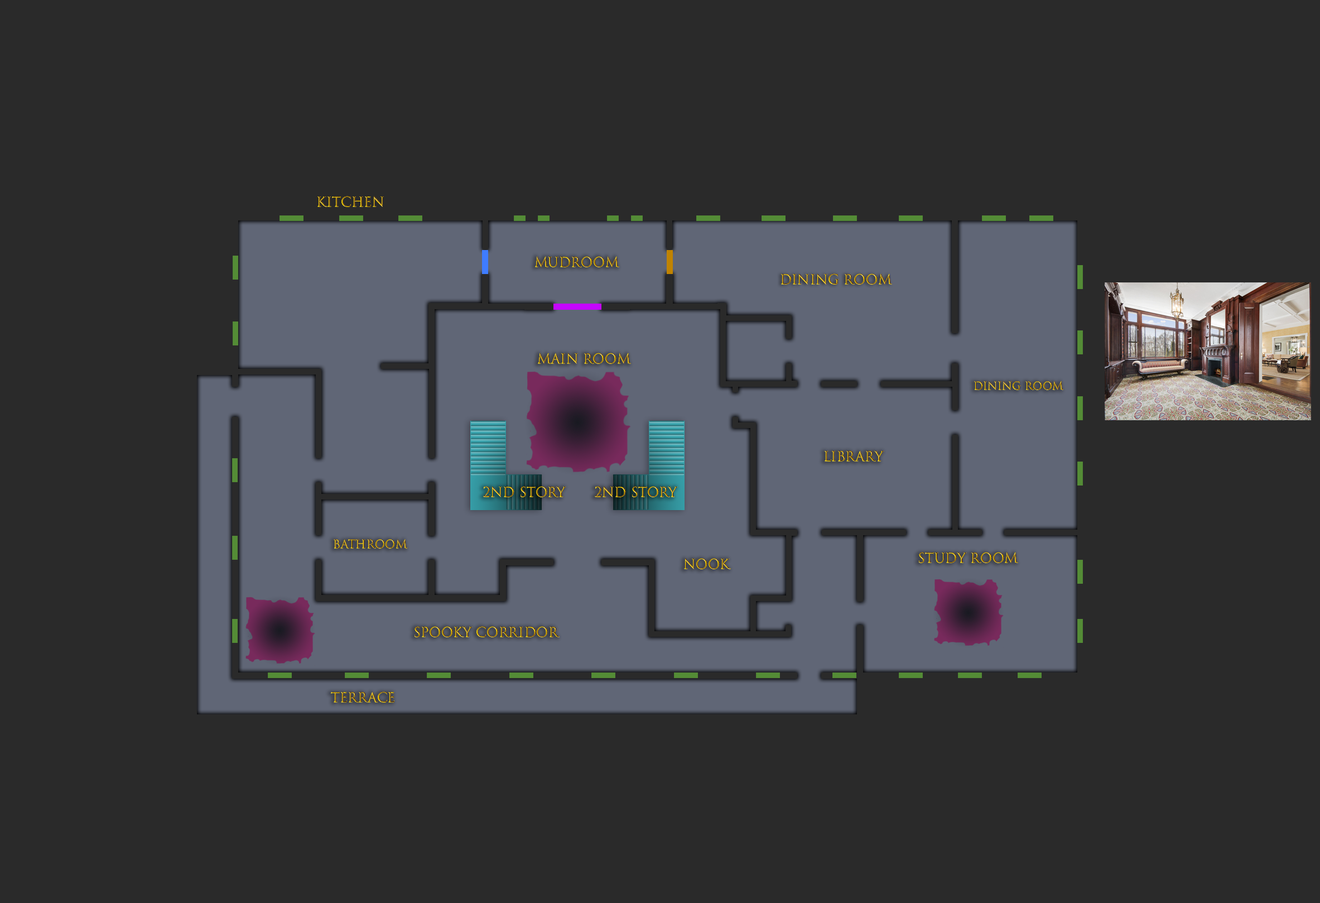
<style>
.page{position:relative;width:1320px;height:903px;background:#2a2a2a}
.page>*{position:absolute;margin:0}
.t1{font:13.2px "TrajanColor-Concept";text-transform:uppercase}
.t2{font:10.6px "TrajanColor-Concept";text-transform:uppercase}
.t3{font:11.2px "TrajanColor-Concept";text-transform:uppercase}
</style>
<div class="page">
<p class="t1" style="left:318px;top:195px;width:66px;height:12px">kitchen</p>
<p class="t1" style="left:535px;top:256px;width:85px;height:11px">mudroom</p>
<p class="t1" style="left:781px;top:273px;width:111px;height:12px">dining room</p>
<p class="t1" style="left:538px;top:353px;width:93px;height:11px">main room</p>
<p class="t2" style="left:974px;top:381px;width:90px;height:9px">dining room</p>
<p class="t1" style="left:824px;top:450px;width:61px;height:12px">library</p>
<p class="t1" style="left:483px;top:486px;width:83px;height:12px">2nd story</p>
<p class="t1" style="left:594px;top:486px;width:84px;height:12px">2nd story</p>
<p class="t3" style="left:334px;top:539px;width:74px;height:10px">bathroom</p>
<p class="t1" style="left:919px;top:552px;width:100px;height:11px">study room</p>
<p class="t1" style="left:684px;top:558px;width:47px;height:12px">nook</p>
<p class="t1" style="left:415px;top:626px;width:145px;height:11px">spooky corridor</p>
<p class="t1" style="left:331px;top:691px;width:64px;height:12px">terrace</p>
</div>
